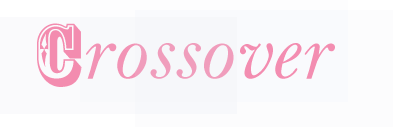
<style>
.page{position:relative;width:393px;height:127px}
.page>*{position:absolute;margin:0}
.t1{font:83.3px "BellMTItalic";color:#f38db1}
.t2{font:83.3px "RosewoodStd-Regular";color:#f38db1}
</style>
<div class="page">
<p class="t1" style="left:37px;top:23px;width:298px;height:64px"><span class="t2">C</span>rossover</p>
</div>
